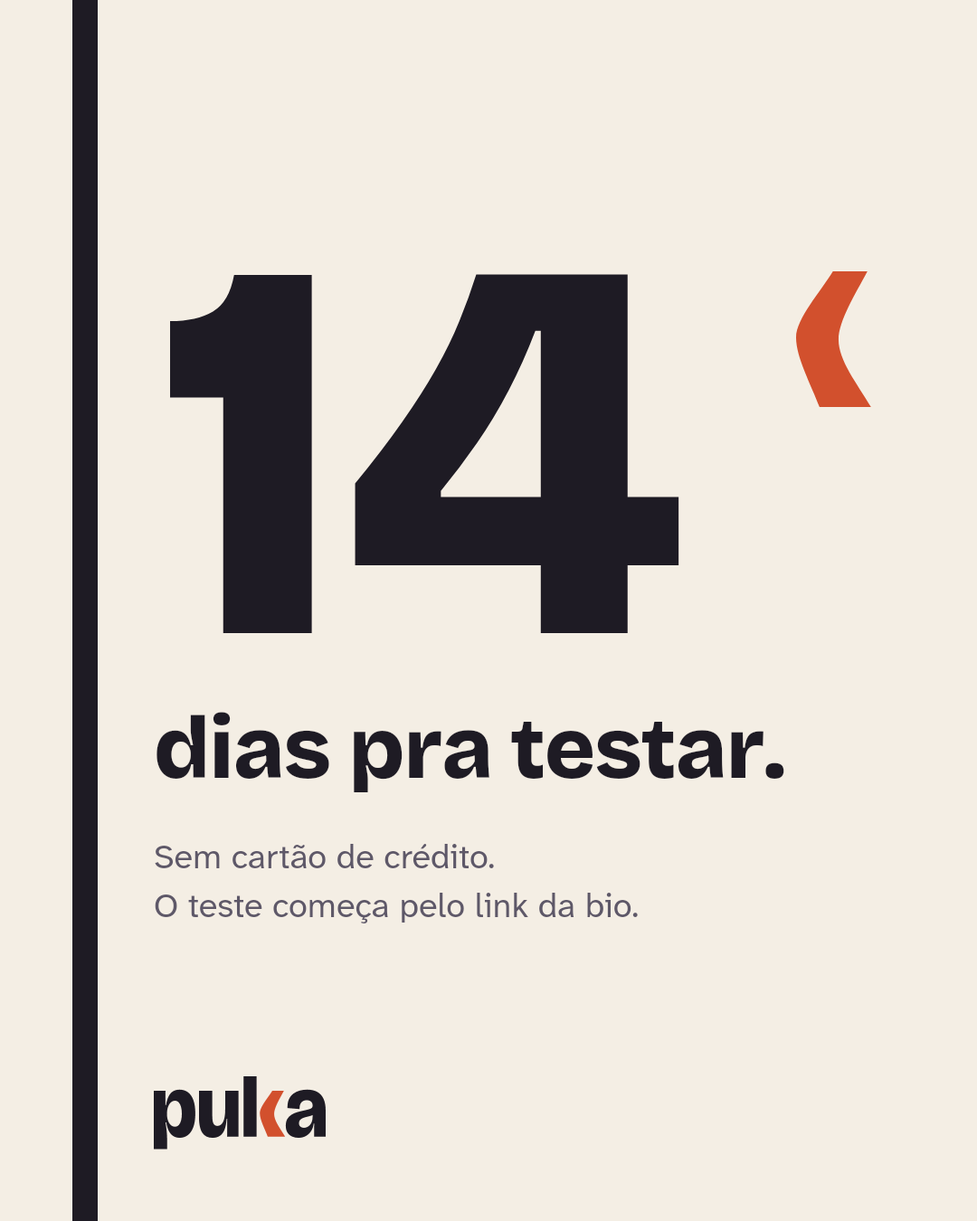
<style>
.page{position:relative;width:977px;height:1221px;background:#f4eee4}
.page>*{position:absolute;margin:0}
.t1{font:542.6px "BricolageGrotesque-ExtraBold";letter-spacing:-0.012em;color:#1e1b24}
.t2{font:86.8px "BricolageGrotesque-ExtraBold";letter-spacing:-0.012em;color:#1e1b24}
.t3{font:34.4px/48.8px "AtkinsonHyperlegibleNext-Regular";color:#5e5868}
</style>
<div class="page">
<p class="t1" style="left:170px;top:274px;width:509px;height:359px">14</p>
<p class="t2" style="left:156px;top:712px;width:628px;height:80px">dias pra testar.</p>
<p class="t3" style="left:155px;top:844px;width:483px;height:79px">Sem cartão de crédito.<br>O teste começa pelo link da bio.</p>
</div>
